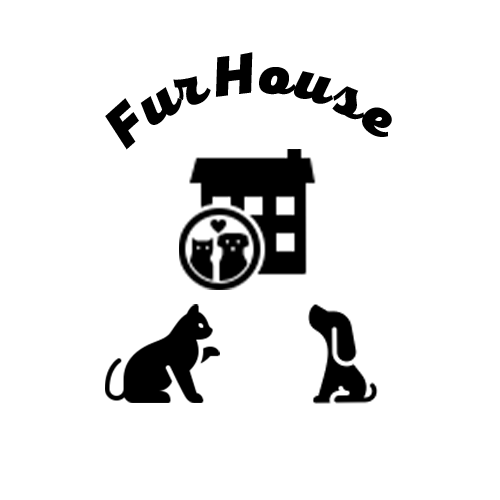
<style>
.page{position:relative;width:500px;height:500px;background:#ffffff}
.page>*{position:absolute;margin:0}
.t1{font:58.3px "Mixa-Trial-Black";color:#000000}
</style>
<div class="page">
<p class="t1" style="left:105px;top:52px;width:287px;height:98px">FurHouse</p>
</div>
